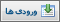
<style>
.page{position:relative;width:60px;height:22px}
.page>*{position:absolute;margin:0}
.t1{font:8px "Tahoma"}
</style>
<div class="page">
<p class="t1" style="left:5px;top:7px;width:32px;height:9px">ورودی ها</p>
</div>
